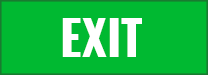
<style>
.page{position:relative;width:208px;height:75px;background:#00b931}
.page>*{position:absolute;margin:0}
.t1{font:48.1px "Oswald-Bold";color:#ffffff}
</style>
<div class="page">
<p class="t1" style="left:62px;top:18px;width:80px;height:39px">EXIT</p>
</div>
